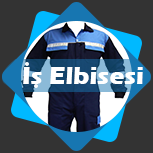
<style>
.page{position:relative;width:153px;height:153px;background:#333333}
.page>*{position:absolute;margin:0}
.t1{font:25px "ErasITC-Bold";color:#ffffff}
</style>
<div class="page">
<p class="t1" style="left:23px;top:67px;width:120px;height:17px">Is Elbisesi</p>
</div>
